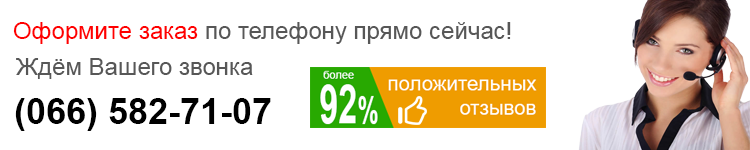
<style>
.page{position:relative;width:750px;height:150px;background:#ffffff}
.page>*{position:absolute;margin:0}
.t1{font:24px "ArialMT";color:#575757}
.t2{font:24px "ArialMT";color:#ff0000}
.t3{font:36px "Arial-BoldMT";color:#000000}
</style>
<div class="page">
<p class="t1" style="left:13px;top:22px;width:498px;height:22px"><span class="t2">Оформите заказ</span> по телефону прямо сейчас!</p>
<p class="t1" style="left:16px;top:58px;width:237px;height:21px">Ждём Вашего звонка</p>
<p class="t3" style="left:15px;top:98px;width:256px;height:33px">(066) 582-71-07</p>
</div>
